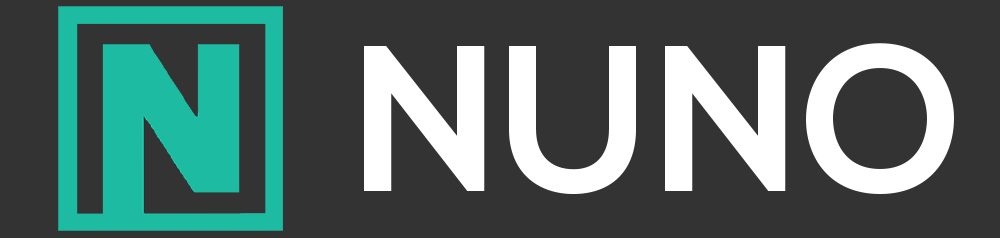
<style>
.page{position:relative;width:1000px;height:238px;background:#333333}
.page>*{position:absolute;margin:0}
.t1{font:207px "NexaBold";color:#ffffff}
</style>
<div class="page">
<p class="t1" style="left:364px;top:43px;width:590px;height:151px">NUNO</p>
</div>
